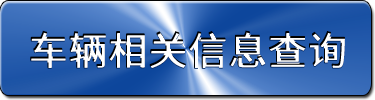
<style>
.page{position:relative;width:375px;height:100px}
.page>*{position:absolute;margin:0}
.t1{font:38.9px "SourceHanSansCN-Regular";font-weight:bold}
</style>
<div class="page">
<p class="t1" style="left:30px;top:30px;width:315px;height:38px">车辆相关信息查询</p>
</div>
